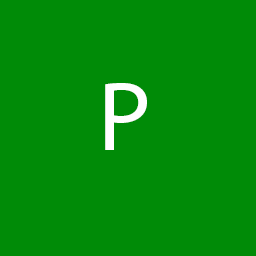
<style>
.page{position:relative;width:256px;height:256px;background:#008b07}
.page>*{position:absolute;margin:0}
.t1{font:100px "MyriadPro-Regular";color:#ffffff}
</style>
<div class="page">
<p class="t1" style="left:105px;top:83px;width:42px;height:67px">P</p>
</div>
